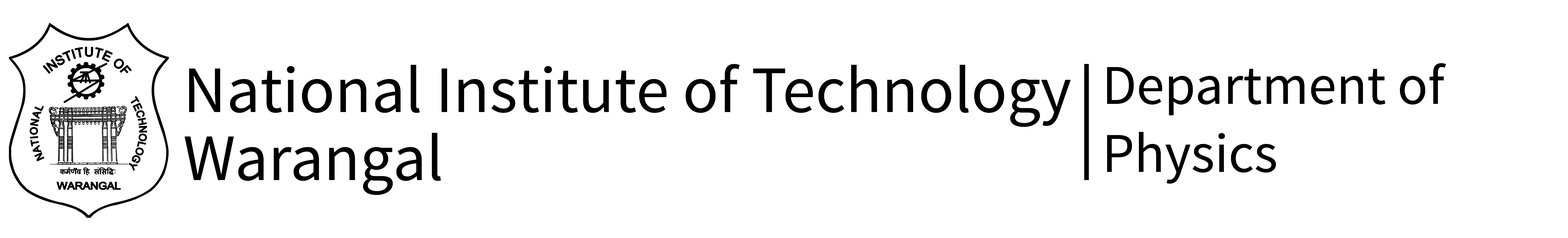
<style>
.page{position:relative;width:1568px;height:238px;background:#ffffff}
.page>*{position:absolute;margin:0}
.t1{font:66.4px/34.1px "SourceSansPro-Regular";color:#000000}
.t2{font:56.2px/34.1px "SourceSansPro-Regular";color:#000000}
</style>
<div class="page">
<p class="t1" style="left:185px;top:64px;width:886px;height:131px">National Institute of Technology <br><br>Warangal</p>
<p class="t2" style="left:1107px;top:63px;width:339px;height:121px">Department of <br><br>Physics</p>
</div>
